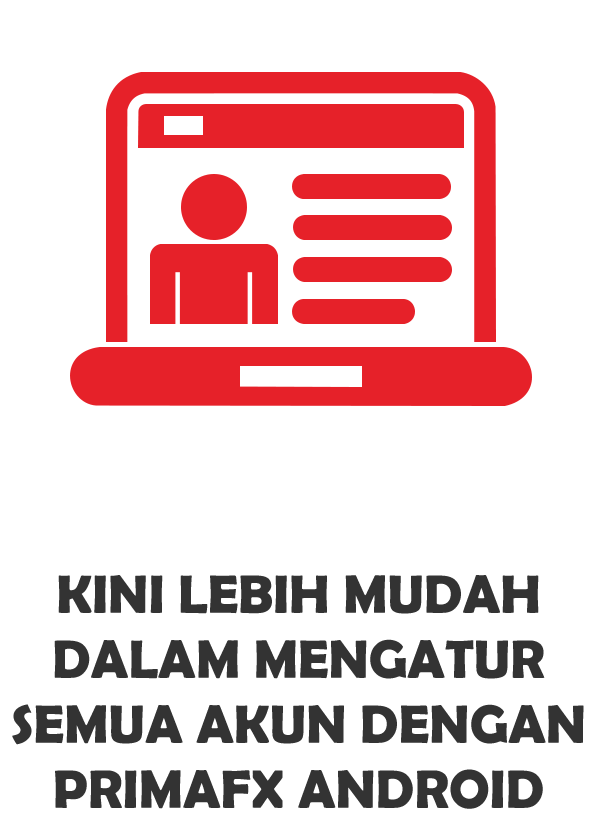
<style>
.page{position:relative;width:600px;height:828px;background:#ffffff}
.page>*{position:absolute;margin:0}
.t1{font:54.2px "BerlinSansFBDemi-Bold";color:#333333}
</style>
<div class="page">
<p class="t1" style="left:12px;top:575px;width:572px;height:234px;text-align:center">KINI LEBIH MUDAH<br>DALAM MENGATUR<br>SEMUA AKUN DENGAN<br>PRIMAFX ANDROID</p>
</div>
